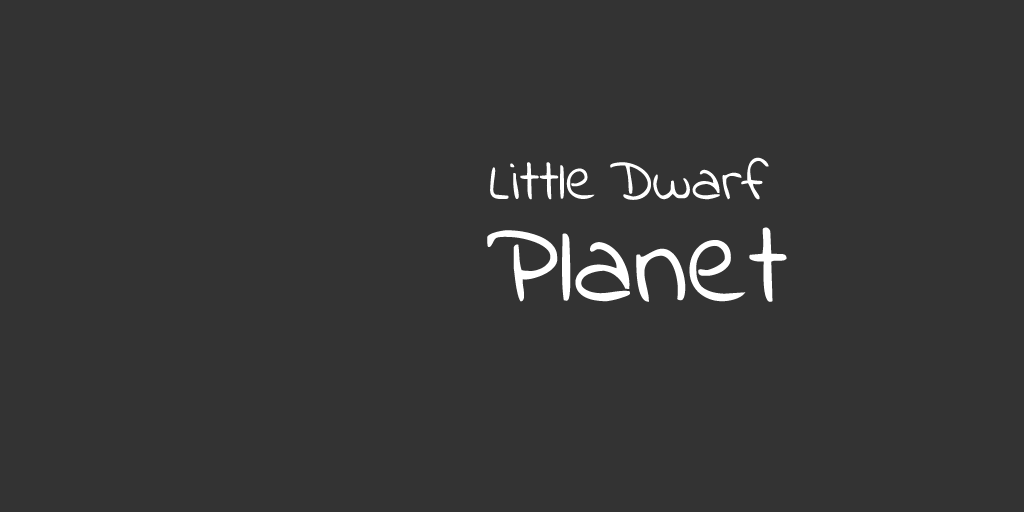
<style>
.page{position:relative;width:1024px;height:512px;background:#333333}
.page>*{position:absolute;margin:0}
.t1{font:59.1px "IndieFlower";color:#ffffff}
.t2{font:118.1px "IndieFlower";color:#ffffff}
</style>
<div class="page">
<p class="t1" style="left:610px;top:157px;width:159px;height:43px">Dwarf</p>
<p class="t1" style="left:490px;top:162px;width:105px;height:38px">Little</p>
<p class="t2" style="left:487px;top:227px;width:300px;height:75px">Planet</p>
</div>
